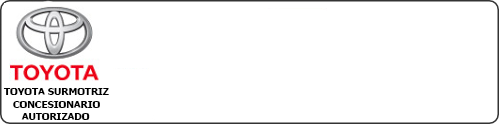
<style>
.page{position:relative;width:500px;height:125px;background:#ffffff}
.page>*{position:absolute;margin:0}
.t1{font:9.9px "Tahoma-Bold";color:#000000}
</style>
<div class="page">
<p class="t1" style="left:3px;top:88px;width:106px;height:7px">TOYOTA SURMOTRIZ</p>
<p class="t1" style="left:13px;top:101px;width:87px;height:19px">CONCESIONARIO <br>   AUTORIZADO</p>
</div>
